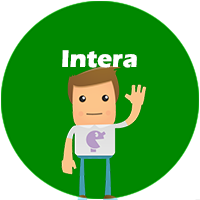
<style>
.page{position:relative;width:200px;height:200px;background:#008800}
.page>*{position:absolute;margin:0}
.t1{font:25px "ErasITC-Bold";color:#ffffff}
</style>
<div class="page">
<p class="t1" style="left:62px;top:50px;width:75px;height:18px">Intera</p>
</div>
